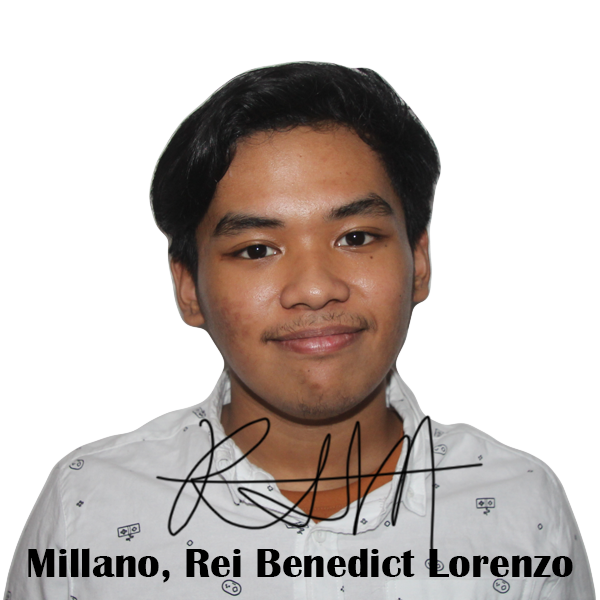
<style>
.page{position:relative;width:600px;height:600px;background:#ffffff}
.page>*{position:absolute;margin:0}
.t1{font:41.7px "BritannicBold";color:#000000}
</style>
<div class="page">
<p class="t1" style="left:28px;top:548px;width:545px;height:35px">Millano, Rei Benedict Lorenzo</p>
</div>
